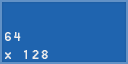
<style>
.page{position:relative;width:128px;height:64px;background:#1f64af}
.page>*{position:absolute;margin:0}
.t1{font:14.7px/18.7px "Fixedsys";color:#ededed}
</style>
<div class="page">
<p class="t1" style="left:5px;top:32px;width:43px;height:27px">64<br>x 128</p>
</div>
